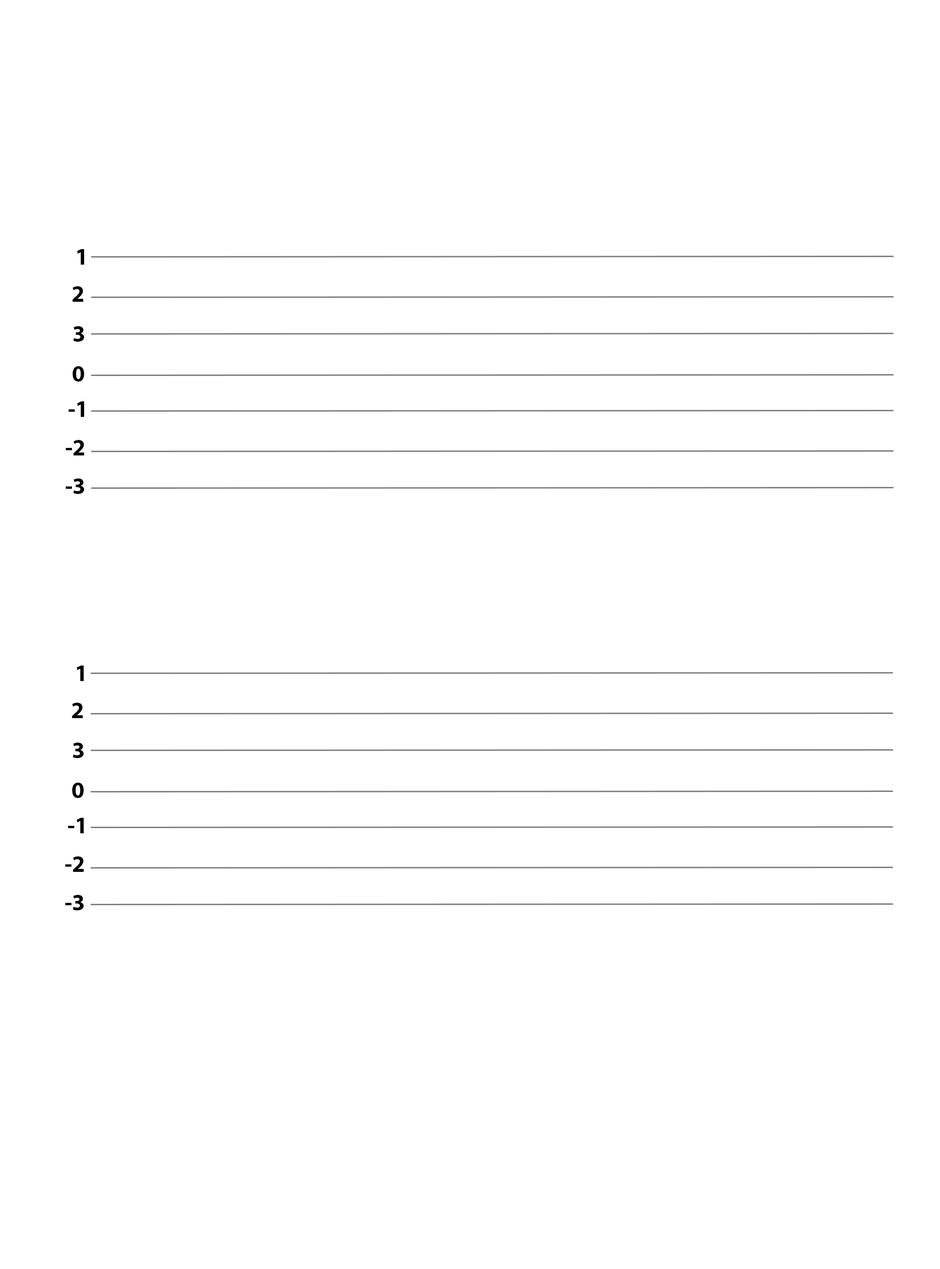
<style>
.page{position:relative;width:940px;height:1269px;background:#ffffff}
.page>*{position:absolute;margin:0}
.t1{font:23.5px "MyriadPro-Bold";color:#000000}
</style>
<div class="page">
<p class="t1" style="left:77px;top:249px;width:7px;height:16px">1</p>
<p class="t1" style="left:72px;top:286px;width:11px;height:16px">2</p>
<p class="t1" style="left:73px;top:326px;width:11px;height:16px">3</p>
<p class="t1" style="left:72px;top:366px;width:12px;height:16px">0</p>
<p class="t1" style="left:69px;top:401px;width:15px;height:16px">-1</p>
<p class="t1" style="left:66px;top:440px;width:18px;height:15px">-2</p>
<p class="t1" style="left:66px;top:478px;width:18px;height:16px">-3</p>
<p class="t1" style="left:77px;top:665px;width:7px;height:16px">1</p>
<p class="t1" style="left:72px;top:703px;width:11px;height:15px">2</p>
<p class="t1" style="left:73px;top:742px;width:11px;height:16px">3</p>
<p class="t1" style="left:72px;top:782px;width:12px;height:16px">0</p>
<p class="t1" style="left:68px;top:818px;width:16px;height:15px">-1</p>
<p class="t1" style="left:65px;top:856px;width:19px;height:16px">-2</p>
<p class="t1" style="left:65px;top:895px;width:19px;height:15px">-3</p>
</div>
